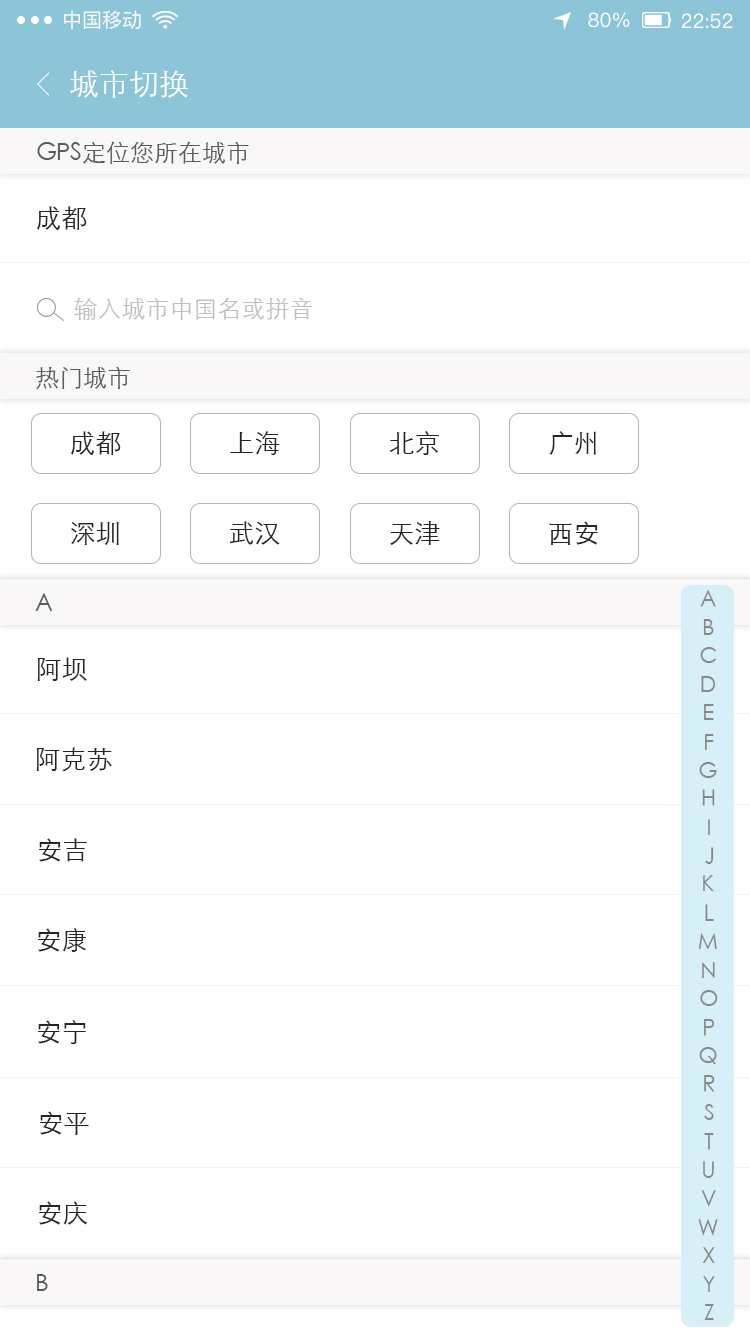
<style>
.page{position:relative;width:750px;height:1334px;background:#ffffff}
.page>*{position:absolute;margin:0}
.t1{font:20px "PingFangSC-Regular";color:#ffffff}
.t2{font:30px "STXihei";color:#ffffff}
.t3{font:24px "STXihei";color:#5b5b5b}
.t4{font:26px "STXihei";color:#272424}
.t5{font:24px "STXihei";color:#c1c0c0}
.t6{font:22px "STXihei";color:#888888}
.t7{font:22px "STXihei"}
</style>
<div class="page">
<p class="t1" style="left:64px;top:10px;width:77px;height:20px">中国移动</p>
<p class="t1" style="left:588px;top:12px;width:42px;height:16px">80%</p>
<p class="t1" style="left:681px;top:13px;width:52px;height:16px">22:52</p>
<p class="t2" style="left:70px;top:70px;width:119px;height:28px">城市切换</p>
<p class="t3" style="left:37px;top:141px;width:212px;height:23px">GPS定位您所在城市</p>
<p class="t4" style="left:36px;top:206px;width:51px;height:24px">成都</p>
<p class="t5" style="left:74px;top:297px;width:239px;height:23px">输入城市中国名或拼音</p>
<p class="t3" style="left:36px;top:367px;width:94px;height:22px">热门城市</p>
<p class="t4" style="left:70px;top:431px;width:51px;height:24px">成都</p>
<p class="t4" style="left:230px;top:431px;width:50px;height:24px">上海</p>
<p class="t4" style="left:389px;top:431px;width:50px;height:24px">北京</p>
<p class="t4" style="left:549px;top:431px;width:47px;height:24px">广州</p>
<p class="t4" style="left:71px;top:521px;width:48px;height:24px">深圳</p>
<p class="t4" style="left:229px;top:521px;width:51px;height:24px">武汉</p>
<p class="t4" style="left:390px;top:521px;width:50px;height:24px">天津</p>
<p class="t4" style="left:549px;top:521px;width:49px;height:24px">西安</p>
<p class="t3" style="left:35px;top:593px;width:18px;height:18px">A</p>
<p class="t6" style="left:700px;top:590px;width:16px;height:17px">A</p>
<p class="t6" style="left:703px;top:619px;width:11px;height:16px">B</p>
<p class="t6" style="left:700px;top:647px;width:17px;height:16px">C</p>
<p class="t4" style="left:37px;top:657px;width:50px;height:24px">阿坝</p>
<p class="t6" style="left:701px;top:676px;width:15px;height:16px">D</p>
<p class="t6" style="left:704px;top:704px;width:10px;height:16px">E</p>
<p class="t6" style="left:705px;top:734px;width:9px;height:16px">F</p>
<p class="t4" style="left:36px;top:747px;width:76px;height:25px">阿克苏</p>
<p class="t6" style="left:699px;top:762px;width:18px;height:16px">G</p>
<p class="t6" style="left:702px;top:789px;width:13px;height:17px">H</p>
<p class="t7" style="left:708px;top:819px;width:2px;height:16px">I</p>
<p class="t4" style="left:39px;top:838px;width:48px;height:24px">安吉</p>
<p class="t6" style="left:705px;top:847px;width:9px;height:17px">J</p>
<p class="t6" style="left:703px;top:875px;width:11px;height:17px">K</p>
<p class="t6" style="left:705px;top:904px;width:9px;height:17px">L</p>
<p class="t4" style="left:38px;top:928px;width:48px;height:24px">安康</p>
<p class="t6" style="left:698px;top:933px;width:19px;height:17px">M</p>
<p class="t6" style="left:702px;top:962px;width:13px;height:16px">N</p>
<p class="t6" style="left:700px;top:990px;width:18px;height:16px">O</p>
<p class="t4" style="left:38px;top:1020px;width:48px;height:24px">安宁</p>
<p class="t6" style="left:704px;top:1019px;width:11px;height:17px">P</p>
<p class="t6" style="left:699px;top:1047px;width:18px;height:17px">Q</p>
<p class="t6" style="left:704px;top:1075px;width:11px;height:17px">R</p>
<p class="t6" style="left:704px;top:1104px;width:10px;height:16px">S</p>
<p class="t4" style="left:40px;top:1111px;width:49px;height:24px">安平</p>
<p class="t6" style="left:704px;top:1133px;width:10px;height:17px">T</p>
<p class="t6" style="left:703px;top:1161px;width:11px;height:17px">U</p>
<p class="t6" style="left:701px;top:1190px;width:15px;height:17px">V</p>
<p class="t4" style="left:39px;top:1201px;width:49px;height:24px">安庆</p>
<p class="t6" style="left:698px;top:1219px;width:20px;height:17px">W</p>
<p class="t6" style="left:702px;top:1247px;width:13px;height:17px">X</p>
<p class="t3" style="left:37px;top:1274px;width:11px;height:17px">B</p>
<p class="t6" style="left:703px;top:1276px;width:12px;height:16px">Y</p>
<p class="t6" style="left:704px;top:1304px;width:10px;height:16px">Z</p>
</div>
